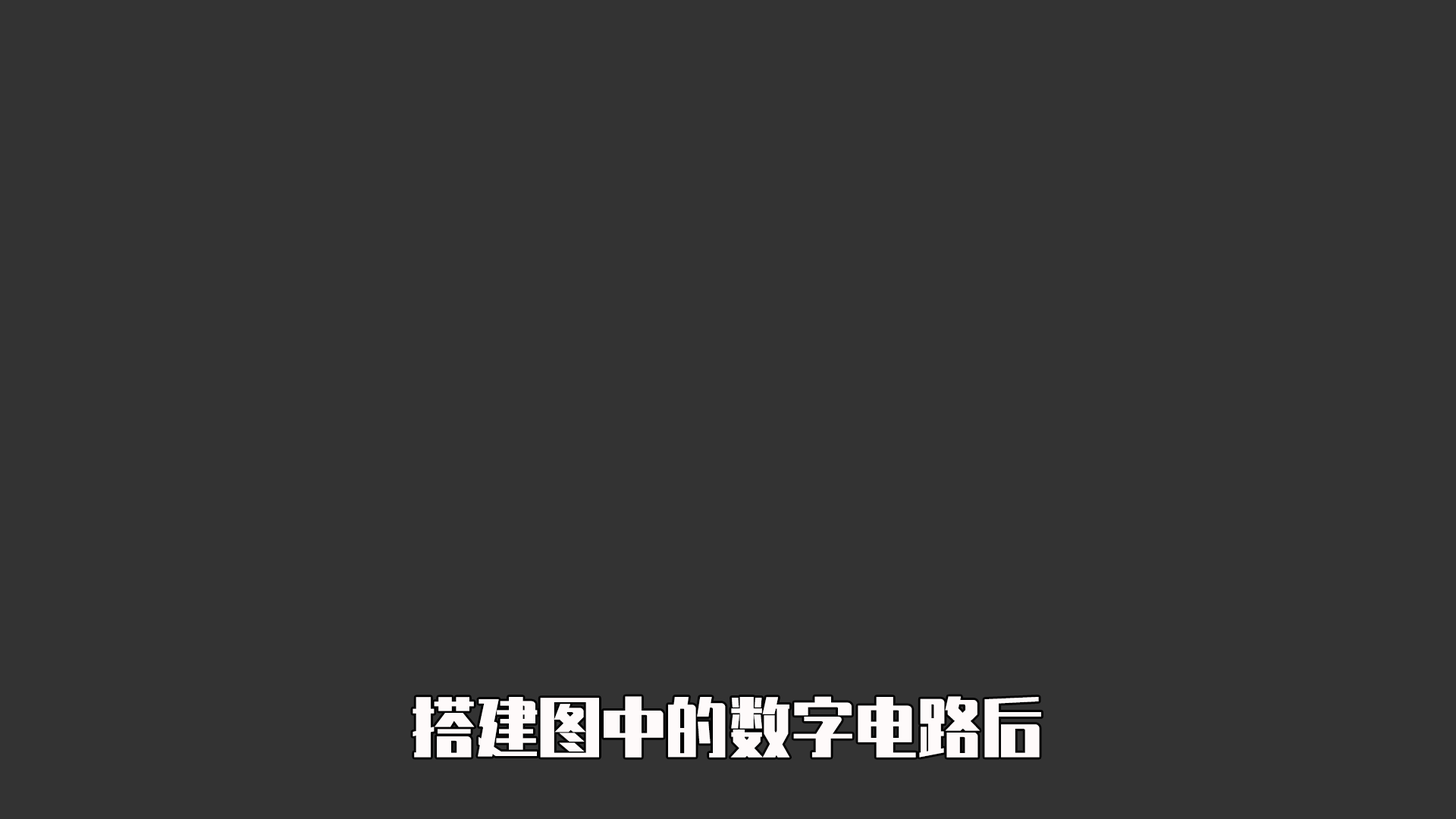
<style>
.page{position:relative;width:1456px;height:819px;background:#333333}
.page>*{position:absolute;margin:0}
.t1{font:63.2px "ZhenyanGB-Regular";color:#fefafa}
</style>
<div class="page">
<p class="t1" style="left:413px;top:696px;width:628px;height:62px">搭建图中的数字电路后</p>
</div>
